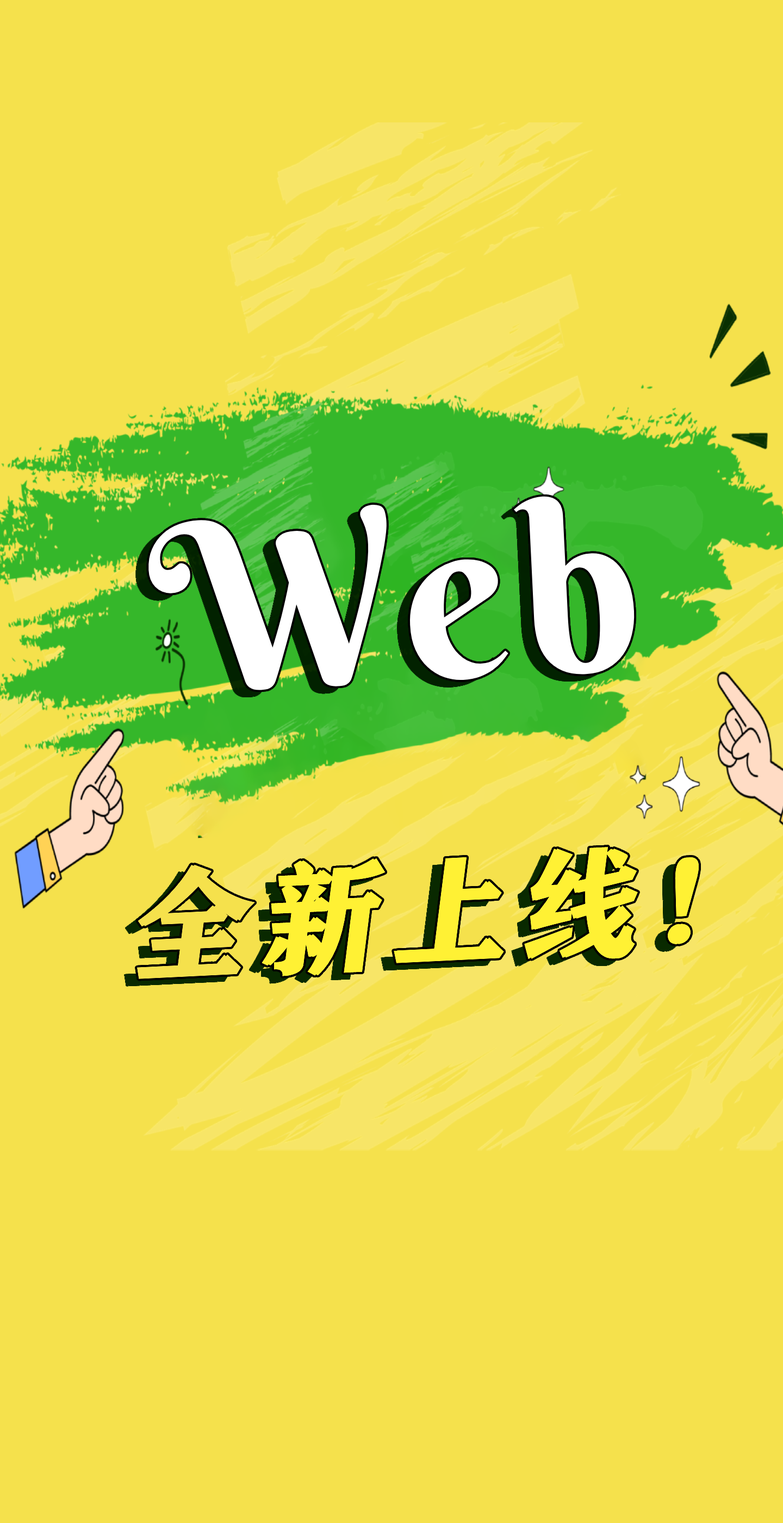
<style>
.page{position:relative;width:783px;height:1523px;background:#f5e14c}
.page>*{position:absolute;margin:0}
.t1{font:233.8px "BerkshireSwash-Regular";letter-spacing:0.06em;color:#ffffff;scale:0.97 1}
.t2{font:121.6px "FZCHSJW--GB1-0";letter-spacing:0.06em;color:#fff134;font-weight:bold;font-style:italic;scale:0.97 1}
.t3{font:121.6px "FZCHSJW--GB1-0";letter-spacing:0.06em;color:#f5e14c;font-weight:bold;font-style:italic;scale:0.97 1}
.t4{font:121.6px "FZCHSJW--GB1-0";letter-spacing:0.14em;color:#fff134;font-weight:bold;font-style:italic;scale:0.97 1}
</style>
<div class="page">
<p class="t1" style="left:148px;top:496px;width:487px;height:194px;rotate:-3deg">Web</p>
<p class="t2" style="left:137px;top:847px;width:563px;height:132px;rotate:-3deg"><span class="t3">全</span>新上<span class="t4">线</span>!</p>
</div>
